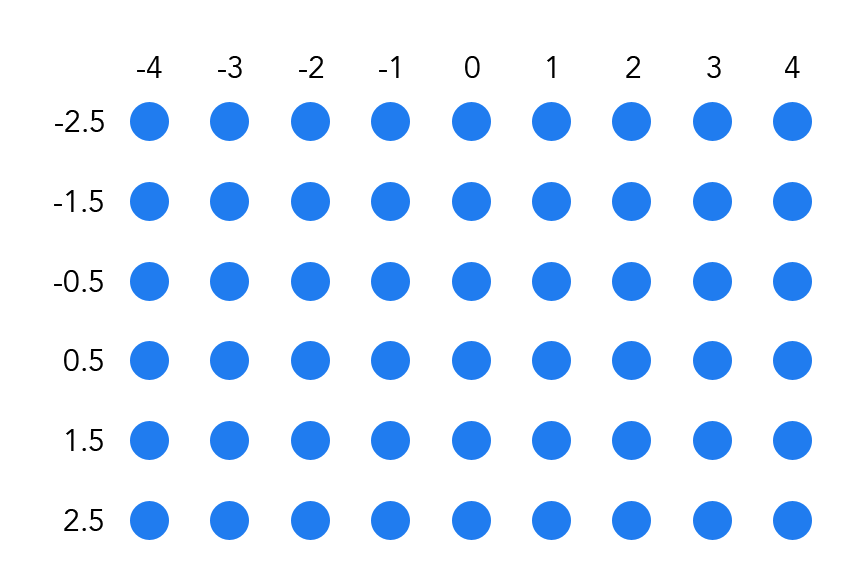
<style>
.page{position:relative;width:852px;height:580px;background:#ffffff}
.page>*{position:absolute;margin:0}
.t1{font:30px "Avenir-Book";color:#000000}
</style>
<div class="page">
<p class="t1" style="left:137px;top:56px;width:25px;height:22px">-4</p>
<p class="t1" style="left:218px;top:56px;width:24px;height:22px">-3</p>
<p class="t1" style="left:299px;top:56px;width:25px;height:22px">-2</p>
<p class="t1" style="left:379px;top:56px;width:20px;height:22px">-1</p>
<p class="t1" style="left:465px;top:56px;width:15px;height:22px">0</p>
<p class="t1" style="left:547px;top:56px;width:8px;height:22px">1</p>
<p class="t1" style="left:626px;top:56px;width:15px;height:22px">2</p>
<p class="t1" style="left:707px;top:56px;width:14px;height:22px">3</p>
<p class="t1" style="left:785px;top:56px;width:15px;height:22px">4</p>
<p class="t1" style="left:55px;top:110px;width:49px;height:22px">-2.5</p>
<p class="t1" style="left:54px;top:190px;width:49px;height:22px">-1.5</p>
<p class="t1" style="left:54px;top:270px;width:49px;height:22px">-0.5</p>
<p class="t1" style="left:64px;top:349px;width:39px;height:22px">0.5</p>
<p class="t1" style="left:66px;top:429px;width:37px;height:22px">1.5</p>
<p class="t1" style="left:64px;top:509px;width:39px;height:22px">2.5</p>
</div>
